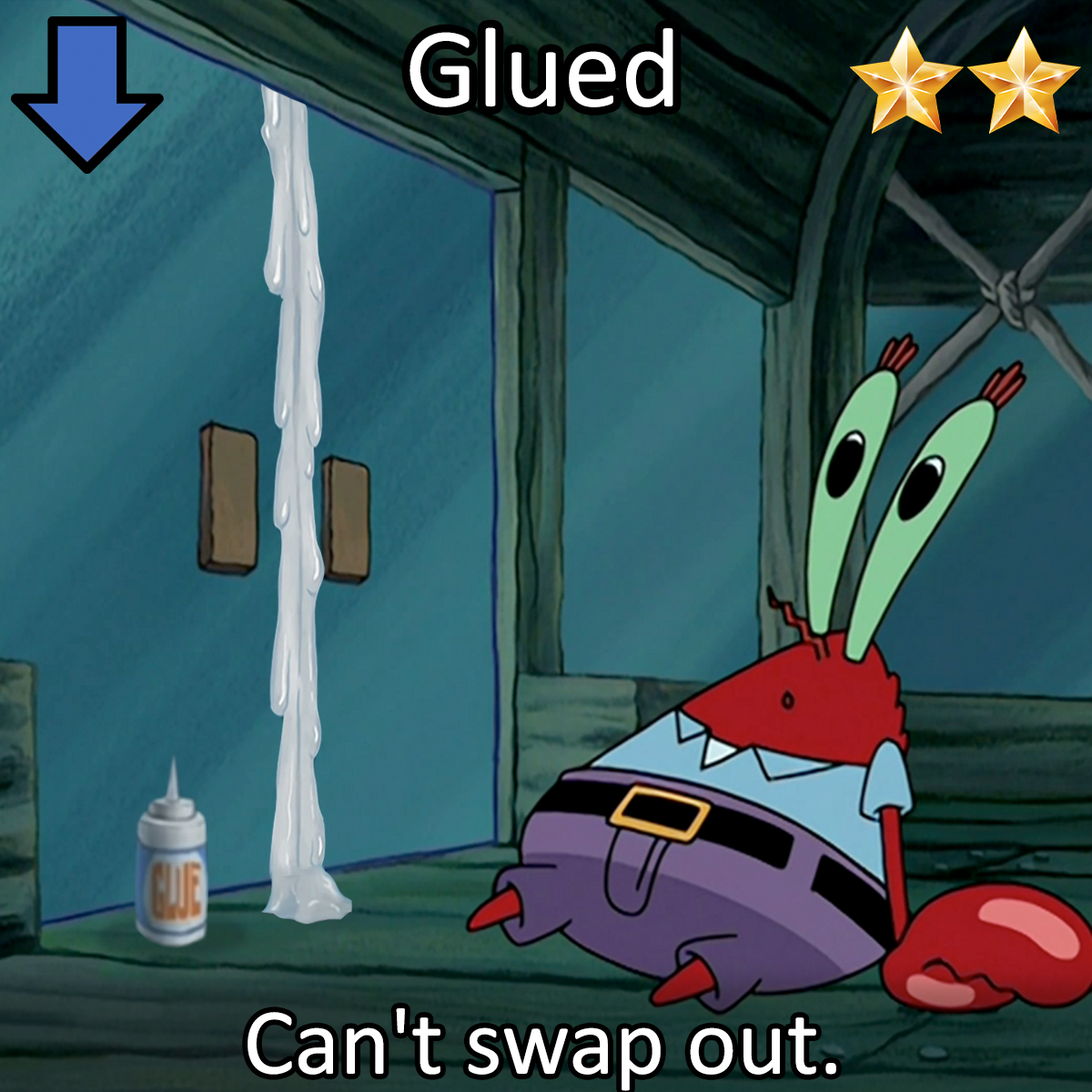
<style>
.page{position:relative;width:1092px;height:1092px}
.page>*{position:absolute;margin:0}
.t1{font:196.6px "Calibri";color:#ffffff}
.t2{font:163.8px "Calibri";color:#ffffff}
</style>
<div class="page">
<p class="t1" style="left:409px;top:27px;width:264px;height:80px">Glued</p>
<p class="t2" style="left:248px;top:1008px;width:588px;height:83px">Can't swap out.</p>
</div>
